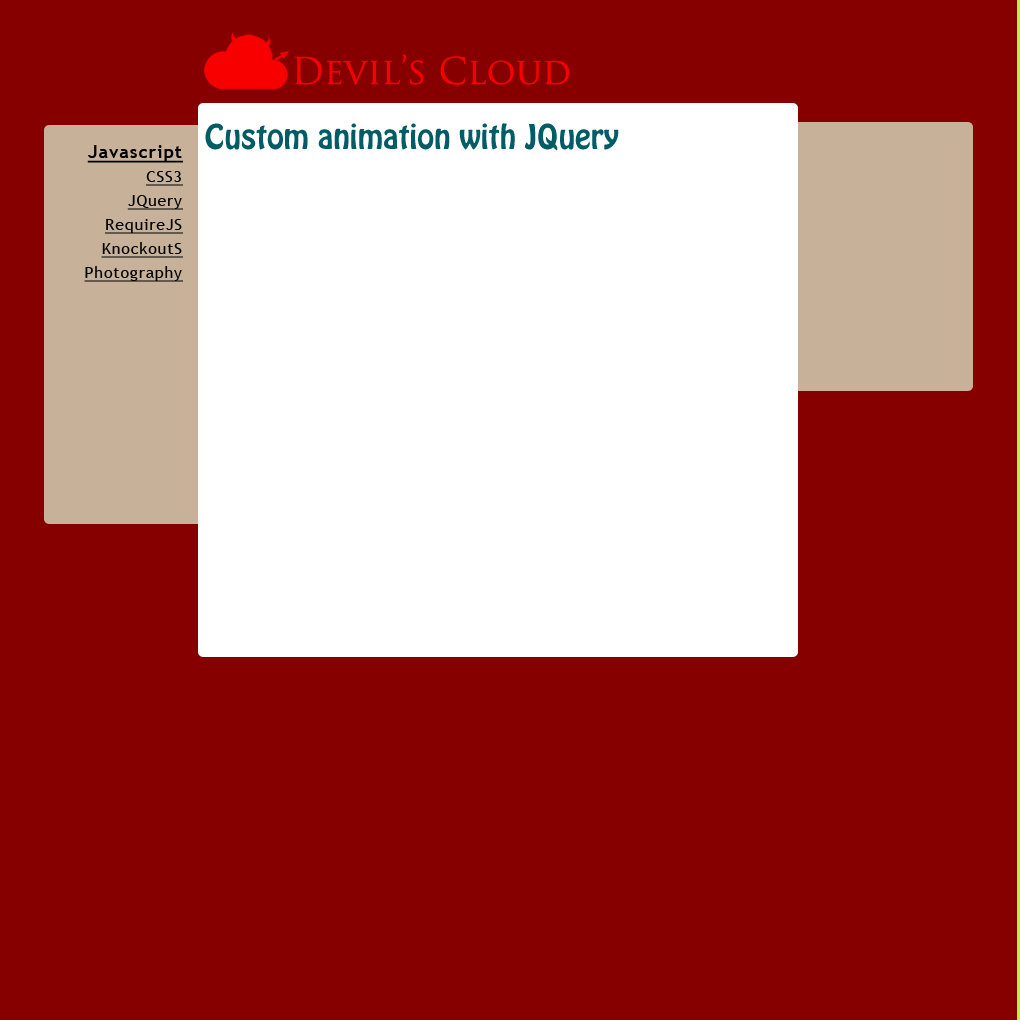
<style>
.page{position:relative;width:1020px;height:1020px;background:#870000}
.page>*{position:absolute;margin:0}
.t1{font:36px "TrajanPro-Regular";color:#f90000}
.t2{font:30px "HoboStd";color:#015c65}
.t3{font:16px/24px "TrebuchetMS";letter-spacing:0.05em;color:#000000;text-decoration:underline}
.t4{font:18px/24px "TrebuchetMS-Bold";letter-spacing:0.05em;color:#000000;text-decoration:underline}
</style>
<div class="page">
<p class="t1" style="left:294px;top:54px;width:276px;height:31px">Devil’s Cloud</p>
<p class="t2" style="left:205px;top:123px;width:414px;height:28px">Custom animation with JQuery</p>
<p class="t3" style="left:84px;top:145px;width:99px;height:137px;text-align:right"><span class="t4">Javascript<br></span>CSS3<br>JQuery<br>RequireJS<br>KnockoutS<br>Photography</p>
</div>
